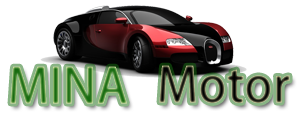
<style>
.page{position:relative;width:300px;height:115px;background:#ffffff}
.page>*{position:absolute;margin:0}
.t1{font:48px "AdobeFanHeitiStd-Bold"}
</style>
<div class="page">
<p class="t1" style="left:159px;top:65px;width:131px;height:38px">Motor</p>
<p class="t1" style="left:10px;top:66px;width:117px;height:38px">MINA</p>
</div>
